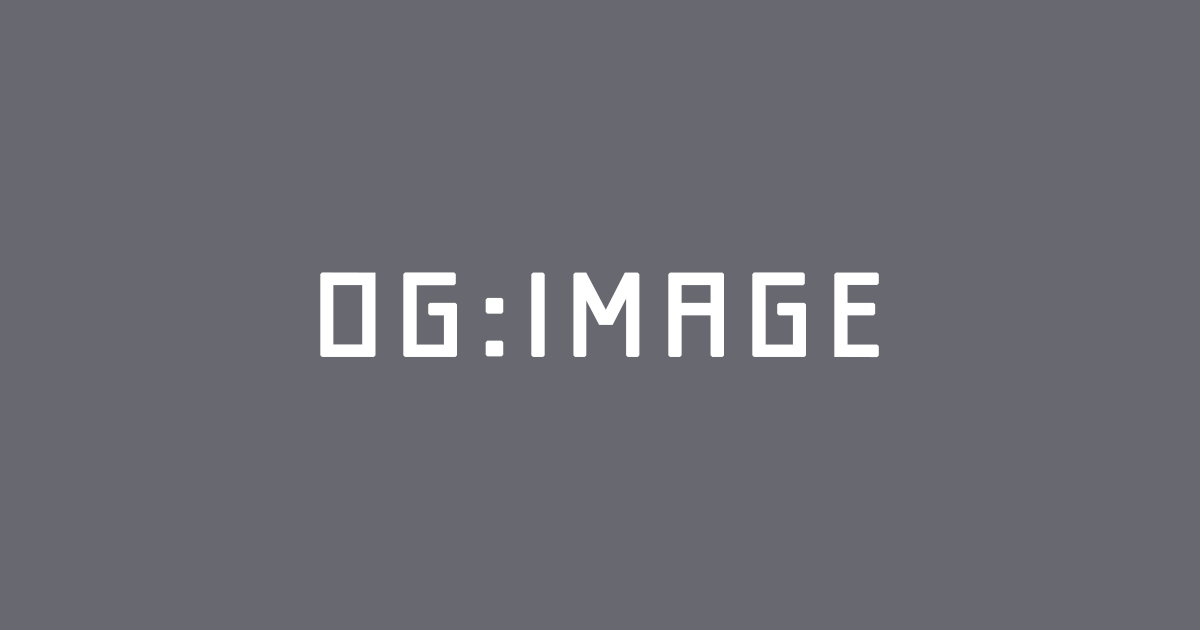
<style>
.page{position:relative;width:1200px;height:630px;background:#686871}
.page>*{position:absolute;margin:0}
.t1{font:120px "Makinas";letter-spacing:0.1em;color:#ffffff;font-weight:bold}
</style>
<div class="page">
<p class="t1" style="left:320px;top:272px;width:559px;height:86px">OG:IMAGE</p>
</div>
